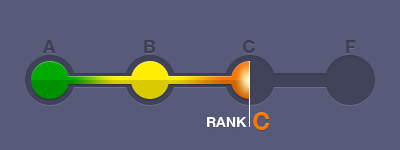
<style>
.page{position:relative;width:400px;height:150px;background:#585a79}
.page>*{position:absolute;margin:0}
.t1{font:18px "HelveticaNeueLTPro-Bd";color:#3d3f55}
.t2{font:18px "HelveticaNeueLTPro-Bd";color:#3d3f54}
.t3{font:18px "HelveticaNeueLTPro-Bd";color:#3c3e53}
.t4{font:18px "HelveticaNeueLTPro-Bd";color:#3c3e54}
.t5{font:24px "HelveticaNeueLTPro-Bd";color:#f77700}
.t6{font:14px "HelveticaNeueLTPro-Bd";color:#ffffff}
</style>
<div class="page">
<p class="t1" style="left:42px;top:40px;width:14px;height:13px">A</p>
<p class="t2" style="left:144px;top:40px;width:11px;height:13px">B</p>
<p class="t3" style="left:243px;top:40px;width:12px;height:13px">C</p>
<p class="t4" style="left:346px;top:40px;width:10px;height:13px">F</p>
<p class="t5" style="left:253px;top:112px;width:17px;height:18px">C</p>
<p class="t6" style="left:207px;top:117px;width:40px;height:10px">RANK</p>
</div>
